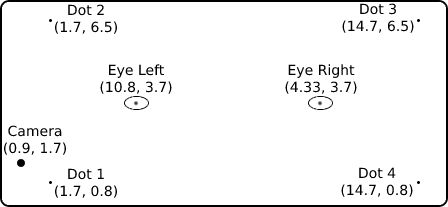
<style>
.page{position:relative;width:448px;height:207px;background:#ffffff}
.page>*{position:absolute;margin:0}
.t1{font:14px "DejaVuSans";color:#000000}
</style>
<div class="page">
<p class="t1" style="left:55px;top:4px;width:62px;height:30px;text-align:center">Dot 2<br>(1.7, 6.5)</p>
<p class="t1" style="left:342px;top:3px;width:72px;height:30px;text-align:center">Dot 3<br>(14.7, 6.5)</p>
<p class="t1" style="left:100px;top:64px;width:72px;height:30px;text-align:center">Eye Left<br>(10.8, 3.7)</p>
<p class="t1" style="left:285px;top:64px;width:72px;height:30px;text-align:center">Eye Right<br>(4.33, 3.7)</p>
<p class="t1" style="left:4px;top:125px;width:62px;height:30px;text-align:center">Camera<br>(0.9, 1.7)</p>
<p class="t1" style="left:55px;top:168px;width:62px;height:30px;text-align:center">Dot 1<br>(1.7, 0.8)</p>
<p class="t1" style="left:341px;top:167px;width:72px;height:30px;text-align:center">Dot 4<br>(14.7, 0.8)</p>
</div>
